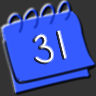
<style>
.page{position:relative;width:96px;height:96px;background:#355bfe}
.page>*{position:absolute;margin:0}
.t1{font:38.7px "All-Things-Pink"}
</style>
<div class="page">
<p class="t1" style="left:33px;top:31px;width:33px;height:33px;rotate:-13deg">31</p>
</div>
